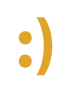
<style>
.page{position:relative;width:72px;height:96px;background:#ffffff}
.page>*{position:absolute;margin:0}
.t1{font:72px "MyriadPro-Bold";color:#e0a528}
</style>
<div class="page">
<p class="t1" style="left:18px;top:17px;width:35px;height:59px">:)</p>
</div>
